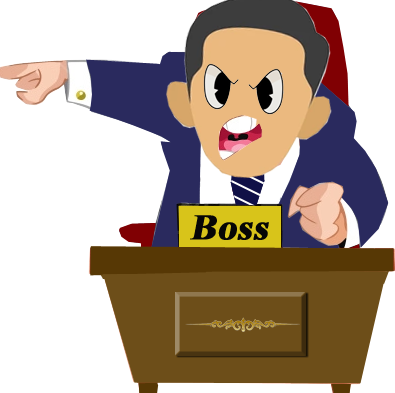
<style>
.page{position:relative;width:395px;height:393px;background:#ffffff}
.page>*{position:absolute;margin:0}
.t1{font:36px "TimesNewRomanPS-BoldMT";color:#060606;font-weight:bold;font-style:italic;scale:1.08 1}
</style>
<div class="page">
<p class="t1" style="left:190px;top:215px;width:79px;height:25px">Boss</p>
</div>
